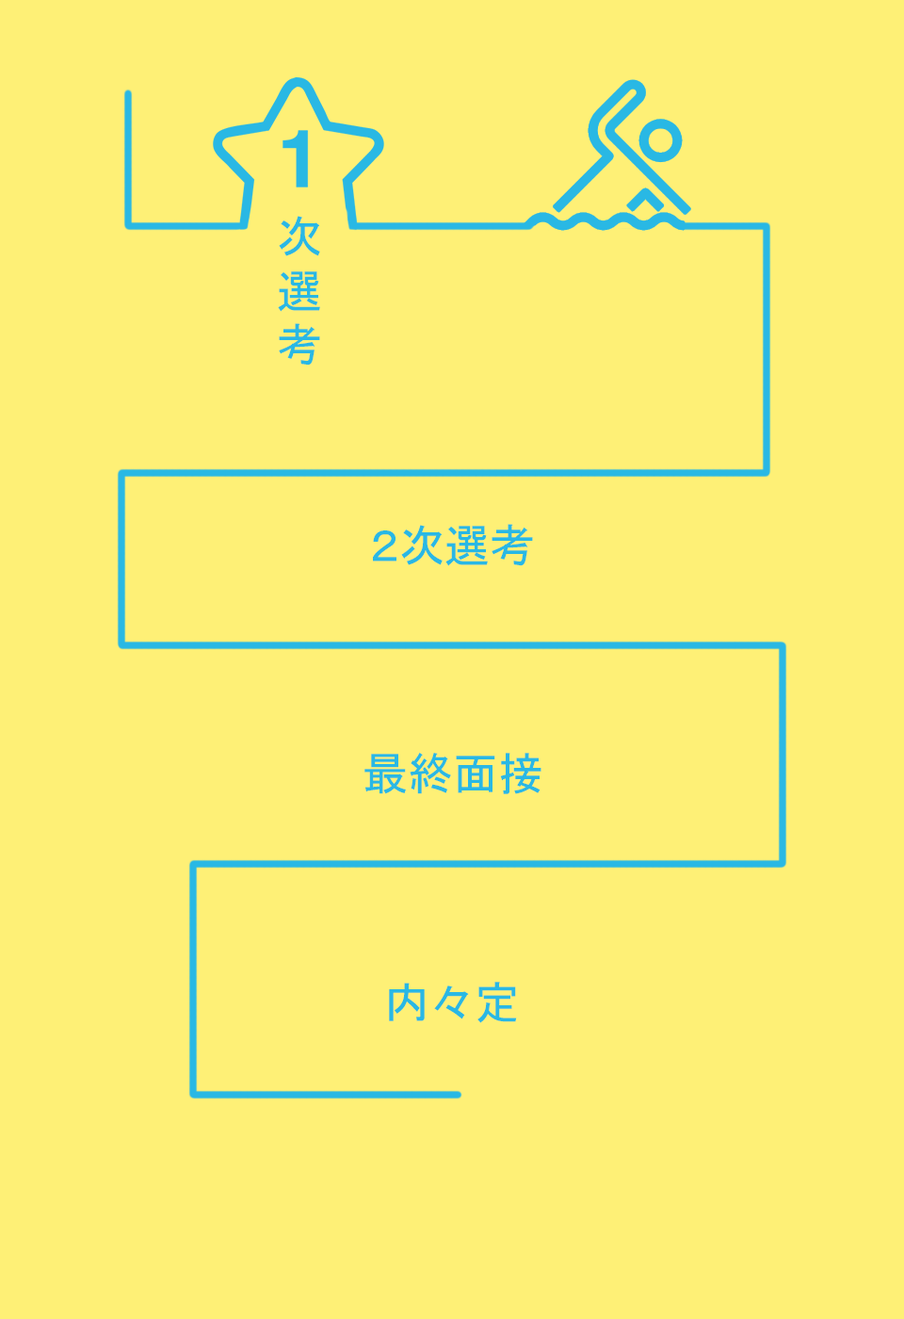
<style>
.page{position:relative;width:904px;height:1319px;background:#fef076}
.page>*{position:absolute;margin:0}
.t1{font:45.2px "MS-UIGothic";color:#29b8e4}
</style>
<div class="page">
<p class="t1" style="left:278px;top:216px;width:42px;height:149px">次<br>選<br>考</p>
<p class="t1" style="left:373px;top:524px;width:160px;height:42px">２次選考</p>
<p class="t1" style="left:365px;top:752px;width:177px;height:42px">最終面接</p>
<p class="t1" style="left:389px;top:981px;width:128px;height:42px">内々定</p>
</div>
